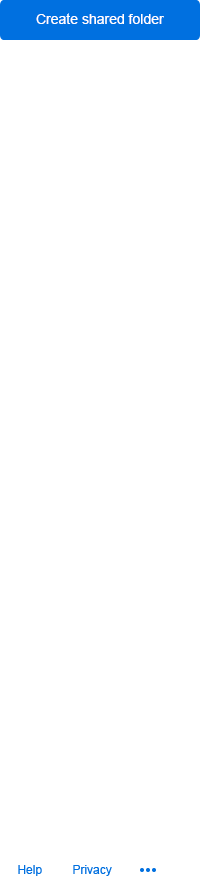
<style>
.page{position:relative;width:200px;height:876px;background:#ffffff}
.page>*{position:absolute;margin:0}
.t1{font:14px "ArialMT";color:#ffffff}
.t2{font:12px "ArialMT";color:#0070e0}
</style>
<div class="page">
<p class="t1" style="left:36px;top:13px;width:128px;height:11px">Create shared folder</p>
<p class="t2" style="left:18px;top:865px;width:24px;height:11px">Help</p>
<p class="t2" style="left:73px;top:865px;width:39px;height:11px">Privacy</p>
</div>
